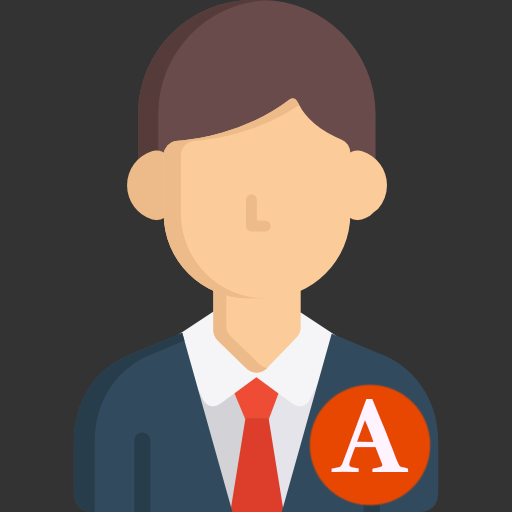
<style>
.page{position:relative;width:512px;height:512px;background:#333333}
.page>*{position:absolute;margin:0}
.t1{font:111.2px "Garamond-Bold";color:#fff3ff}
</style>
<div class="page">
<p class="t1" style="left:331px;top:399px;width:78px;height:73px">A</p>
</div>
